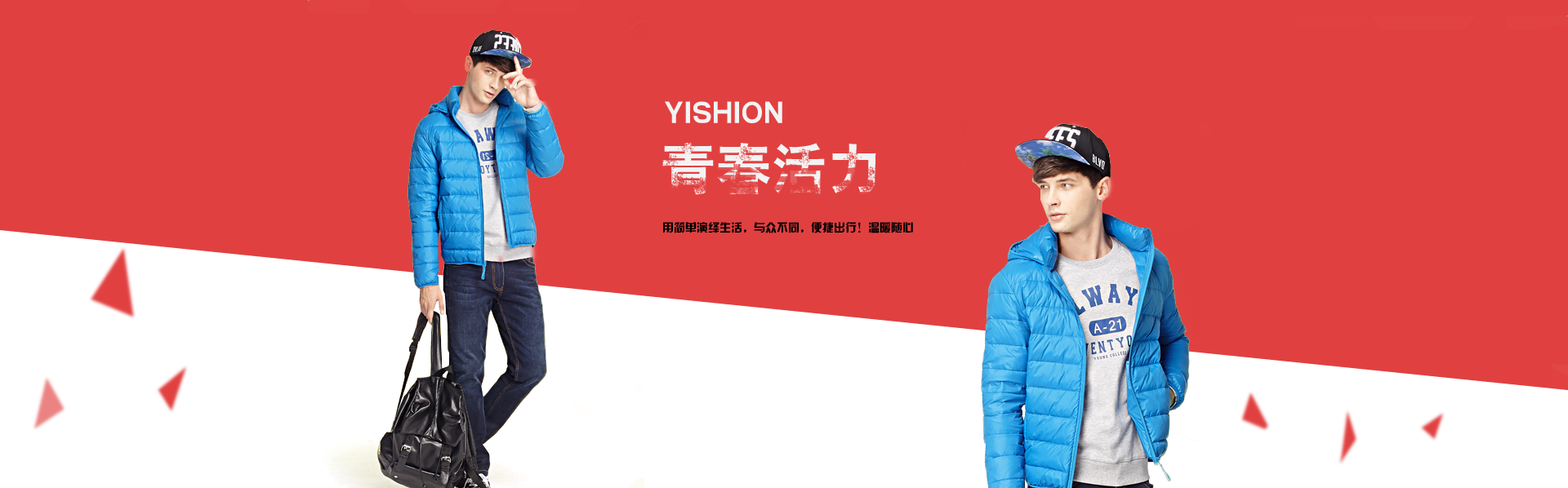
<style>
.page{position:relative;width:1568px;height:488px;background:#e14040}
.page>*{position:absolute;margin:0}
.t1{font:31px "HYb2gj";color:#f3f3f3}
.t2{font:11.4px "HYk2gj";color:#000000}
</style>
<div class="page">
<p class="t1" style="left:665px;top:101px;width:117px;height:22px">YISHION</p>
<p class="t2" style="left:663px;top:222px;width:250px;height:12px">用简单演绎生活，与众不同，便捷出行！温暖随心</p>
</div>
